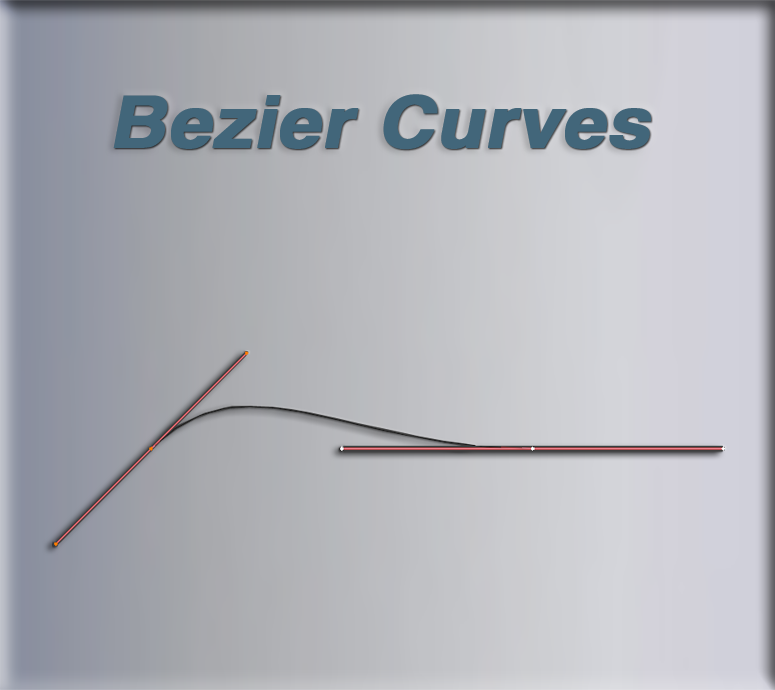
<style>
.page{position:relative;width:775px;height:690px}
.page>*{position:absolute;margin:0}
.t1{font:71.6px "HelveticaLTStd-Bold";color:#42667a;font-weight:bold;font-style:italic;scale:1.08 1}
</style>
<div class="page">
<p class="t1" style="left:113px;top:94px;width:538px;height:56px">Bezier Curves</p>
</div>
